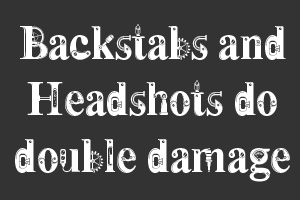
<style>
.page{position:relative;width:300px;height:200px;background:#333333}
.page>*{position:absolute;margin:0}
.t1{font:47px "Steamy";letter-spacing:-0.04em;color:#ffffff}
</style>
<div class="page">
<p class="t1" style="left:15px;top:24px;width:275px;height:158px;text-align:center">Backstabs and<br>Headshots do<br>double damage</p>
</div>
